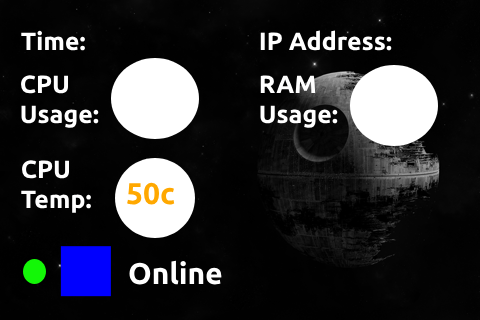
<style>
.page{position:relative;width:480px;height:320px;background:#010101}
.page>*{position:absolute;margin:0}
.t1{font:25px "Ubuntu-Bold";color:#ffffff}
.t2{font:30px "Ubuntu-Bold";color:#ffa800}
.t3{font:30px "Ubuntu-Bold";color:#ffffff}
</style>
<div class="page">
<p class="t1" style="left:21px;top:30px;width:64px;height:21px">Time:</p>
<p class="t1" style="left:260px;top:30px;width:132px;height:21px">IP Address:</p>
<p class="t1" style="left:21px;top:75px;width:78px;height:53px">CPU <br>Usage:</p>
<p class="t1" style="left:260px;top:75px;width:78px;height:53px">RAM <br>Usage:</p>
<p class="t1" style="left:21px;top:160px;width:70px;height:53px">CPU<br>Temp:</p>
<p class="t2" style="left:127px;top:182px;width:48px;height:23px">50c</p>
<p class="t3" style="left:129px;top:260px;width:93px;height:25px">Online</p>
</div>
